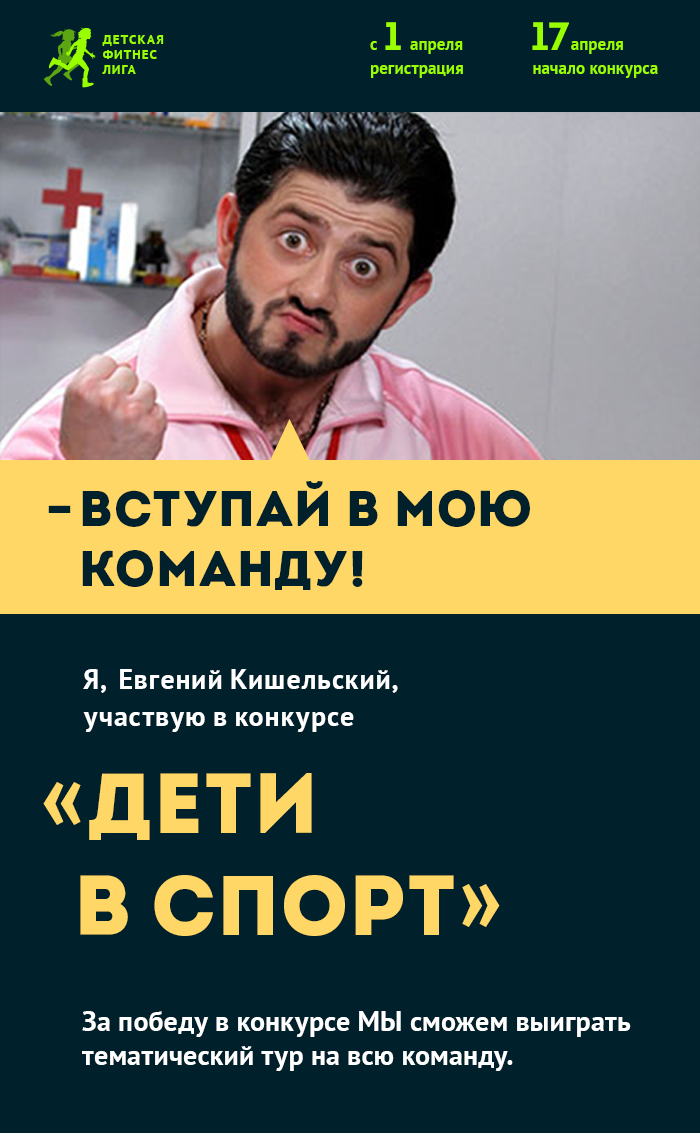
<style>
.page{position:relative;width:700px;height:1133px;background:#00202b}
.page>*{position:absolute;margin:0}
.t1{font:39.7px "Intro-Bold";color:#99ff00}
.t2{font:12.7px "PTSans-Bold";letter-spacing:0.1em;color:#99ff00;text-transform:uppercase}
.t3{font:17px "PTSans-Bold";color:#99ff00}
.t4{font:49.9px/59.9px "Intro-Black";letter-spacing:0.025em;color:#00202b;text-transform:uppercase}
.t5{font:28.3px "PTSans-Bold";color:#ffffff;text-transform:uppercase}
.t6{font:28.3px "PTSans-Bold";color:#ffffff}
.t7{font:84.9px "Intro-Black";color:#ffd766;text-transform:uppercase}
</style>
<div class="page">
<p class="t1" style="left:385px;top:22px;width:16px;height:28px">1</p>
<p class="t1" style="left:532px;top:22px;width:37px;height:28px">17</p>
<p class="t2" style="left:102px;top:35px;width:62px;height:39px">детская<br>фитнес<br>лига</p>
<p class="t3" style="left:370px;top:41px;width:7px;height:9px">c</p>
<p class="t3" style="left:410px;top:41px;width:53px;height:13px">апреля</p>
<p class="t3" style="left:571px;top:41px;width:52px;height:13px">апреля</p>
<p class="t3" style="left:371px;top:65px;width:92px;height:13px">регистрация</p>
<p class="t3" style="left:533px;top:65px;width:125px;height:13px">начало конкурса</p>
<p class="t4" style="left:48px;top:481px;width:482px;height:109px">–Вступай в мою<br>команду!</p>
<p class="t5" style="left:83px;top:669px;width:23px;height:24px">Я,</p>
<p class="t6" style="left:120px;top:669px;width:278px;height:24px">Евгений Кишельский,</p>
<p class="t6" style="left:83px;top:712px;width:271px;height:20px">участвую в конкурсе</p>
<p class="t7" style="left:43px;top:773px;width:457px;height:163px">«Дети<br>в спорт»</p>
<p class="t6" style="left:82px;top:1011px;width:549px;height:60px">За победу в конкурсе МЫ сможем выиграть тематический тур на всю команду.</p>
</div>
